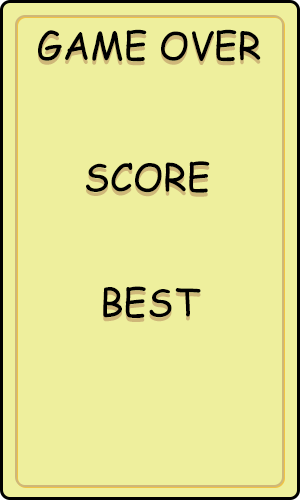
<style>
.page{position:relative;width:300px;height:500px;background:#eeef9d}
.page>*{position:absolute;margin:0}
.t1{font:38px "ComicSansMS";color:#000000}
.t2{font:38px "ComicSansMS"}
</style>
<div class="page">
<p class="t1" style="left:38px;top:29px;width:223px;height:33px">GAME OVER</p>
<p class="t2" style="left:38px;top:33px;width:223px;height:33px">GAME OVER</p>
<p class="t1" style="left:86px;top:161px;width:124px;height:32px">SCORE</p>
<p class="t1" style="left:103px;top:286px;width:98px;height:32px">BEST</p>
</div>
